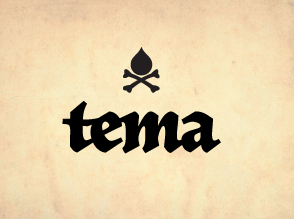
<style>
.page{position:relative;width:294px;height:219px}
.page>*{position:absolute;margin:0}
.t1{font:72px "Herb";color:#000000}
</style>
<div class="page">
<p class="t1" style="left:62px;top:100px;width:159px;height:54px">tema</p>
</div>
